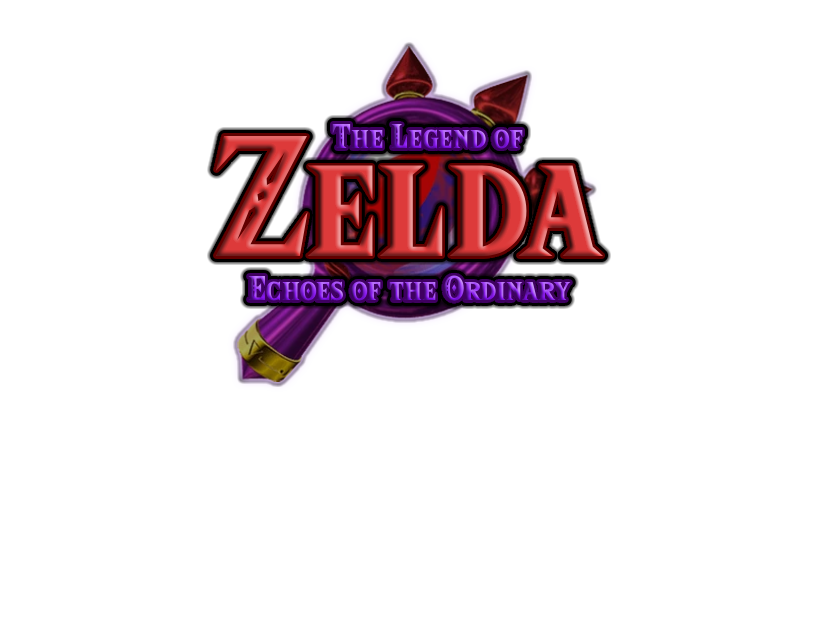
<style>
.page{position:relative;width:816px;height:624px;background:#ffffff}
.page>*{position:absolute;margin:0}
.t1{font:30px "HyliaSerifBeta-Regular"}
.t2{font:150px "HyliaSerifBeta-Regular"}
</style>
<div class="page">
<p class="t1" style="left:332px;top:124px;width:191px;height:25px">The Legend of</p>
<p class="t2" style="left:215px;top:136px;width:388px;height:120px">Zelda</p>
<p class="t1" style="left:248px;top:275px;width:323px;height:26px">Echoes of the Ordinary</p>
</div>
